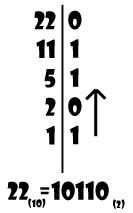
<style>
.page{position:relative;width:133px;height:213px;background:#ffffff}
.page>*{position:absolute;margin:0}
.t1{font:24px "ShowcardGothic-Reg";color:#000000}
.t2{font:10px "ShowcardGothic-Reg";color:#000000}
</style>
<div class="page">
<p class="t1" style="left:34px;top:11px;width:22px;height:134px;text-align:right">22<br>11<br>5<br>2<br>1</p>
<p class="t1" style="left:68px;top:10px;width:14px;height:135px;text-align:center">0<br>1<br>1<br>0<br>1</p>
<p class="t1" style="left:7px;top:181px;width:102px;height:20px">22  =10110</p>
<p class="t2" style="left:28px;top:198px;width:18px;height:10px">(10)</p>
<p class="t2" style="left:113px;top:199px;width:12px;height:10px">(2)</p>
</div>
